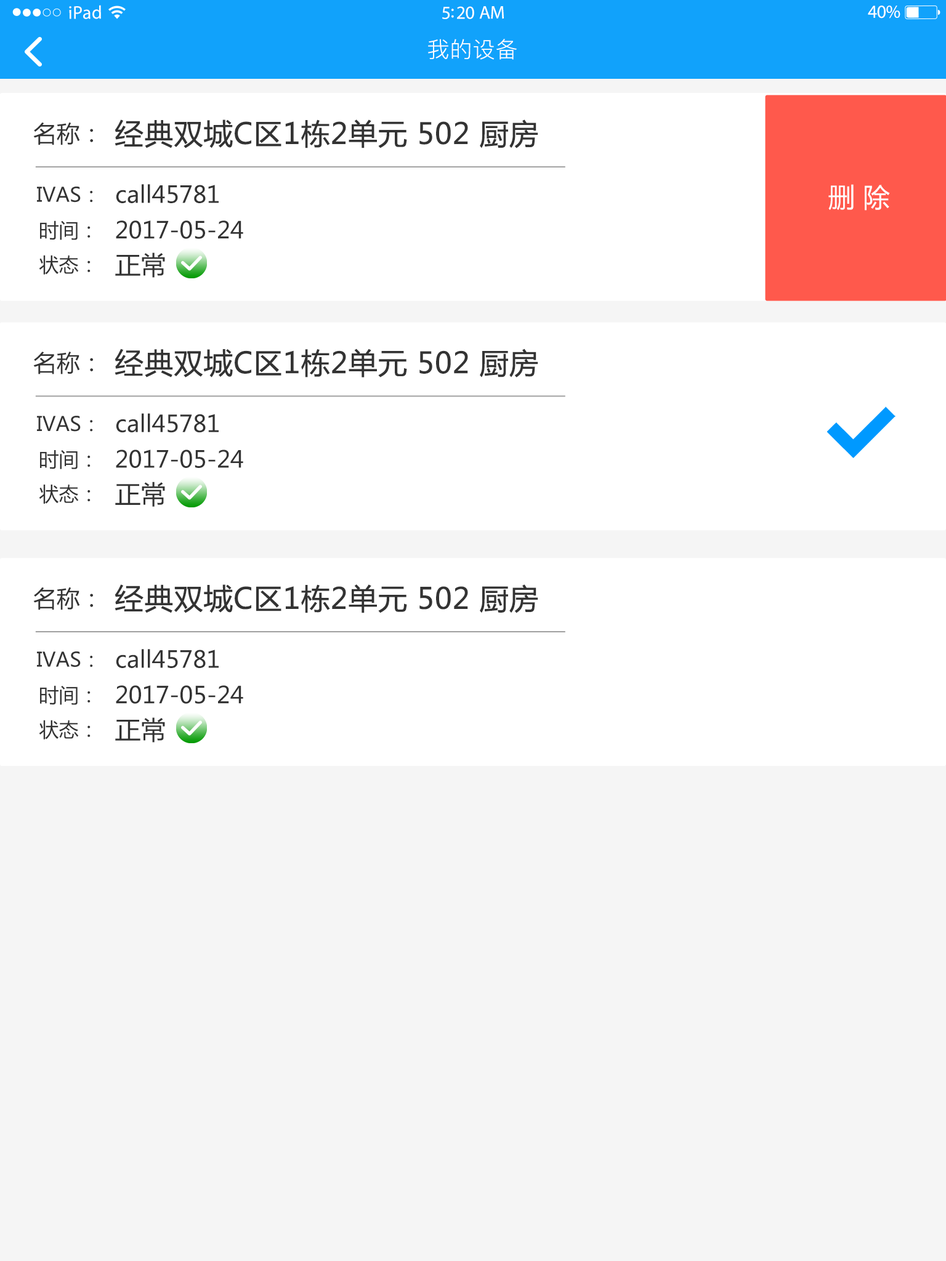
<style>
.page{position:relative;width:946px;height:1261px;background:#f5f5f5}
.page>*{position:absolute;margin:0}
.t1{font:18.5px "MyriadPro-Regular";letter-spacing:0.02em;color:#ffffff}
.t2{font:18.5px "MyriadPro-Regular";letter-spacing:-0.02em;color:#ffffff}
.t3{font:22.2px "PingFang-SC-Regular";letter-spacing:0.03em;color:#ffffff}
.t4{font:23.2px "MicrosoftYaHei";color:#333333}
.t5{font:28.9px "MicrosoftYaHei";color:#333333;font-weight:bold}
.t6{font:26.7px "MicrosoftYaHei";color:#ffffff}
.t7{font:19.9px "MicrosoftYaHei";color:#333333}
.t8{font:25.6px "MicrosoftYaHei";color:#333333}
</style>
<div class="page">
<p class="t1" style="left:69px;top:5px;width:32px;height:14px">iPad</p>
<p class="t2" style="left:867px;top:6px;width:33px;height:12px">40%</p>
<p class="t2" style="left:442px;top:6px;width:62px;height:13px">5:20 AM</p>
<p class="t3" style="left:428px;top:39px;width:89px;height:21px">我的设备</p>
<p class="t4" style="left:33px;top:122px;width:60px;height:23px">名称：</p>
<p class="t5" style="left:115px;top:119px;width:423px;height:29px">经典双城C区1栋2单元 502 厨房</p>
<p class="t4" style="left:116px;top:184px;width:103px;height:19px">call45781</p>
<p class="t6" style="left:828px;top:184px;width:62px;height:27px">删 除</p>
<p class="t7" style="left:37px;top:187px;width:56px;height:16px">IVAS：</p>
<p class="t7" style="left:40px;top:220px;width:51px;height:20px">时间：</p>
<p class="t4" style="left:116px;top:220px;width:127px;height:19px">2017-05-24</p>
<p class="t7" style="left:39px;top:255px;width:52px;height:20px">状态：</p>
<p class="t8" style="left:115px;top:252px;width:50px;height:26px">正常</p>
<p class="t4" style="left:33px;top:352px;width:60px;height:22px">名称：</p>
<p class="t5" style="left:115px;top:348px;width:423px;height:29px">经典双城C区1栋2单元 502 厨房</p>
<p class="t4" style="left:116px;top:413px;width:103px;height:20px">call45781</p>
<p class="t7" style="left:37px;top:416px;width:56px;height:16px">IVAS：</p>
<p class="t4" style="left:116px;top:449px;width:127px;height:19px">2017-05-24</p>
<p class="t7" style="left:40px;top:450px;width:51px;height:19px">时间：</p>
<p class="t7" style="left:39px;top:485px;width:52px;height:19px">状态：</p>
<p class="t8" style="left:115px;top:481px;width:50px;height:26px">正常</p>
<p class="t4" style="left:33px;top:587px;width:60px;height:23px">名称：</p>
<p class="t5" style="left:115px;top:584px;width:423px;height:29px">经典双城C区1栋2单元 502 厨房</p>
<p class="t7" style="left:37px;top:651px;width:56px;height:16px">IVAS：</p>
<p class="t4" style="left:116px;top:649px;width:103px;height:19px">call45781</p>
<p class="t7" style="left:40px;top:685px;width:51px;height:20px">时间：</p>
<p class="t4" style="left:116px;top:685px;width:127px;height:19px">2017-05-24</p>
<p class="t7" style="left:39px;top:720px;width:52px;height:19px">状态：</p>
<p class="t8" style="left:115px;top:717px;width:50px;height:26px">正常</p>
</div>
